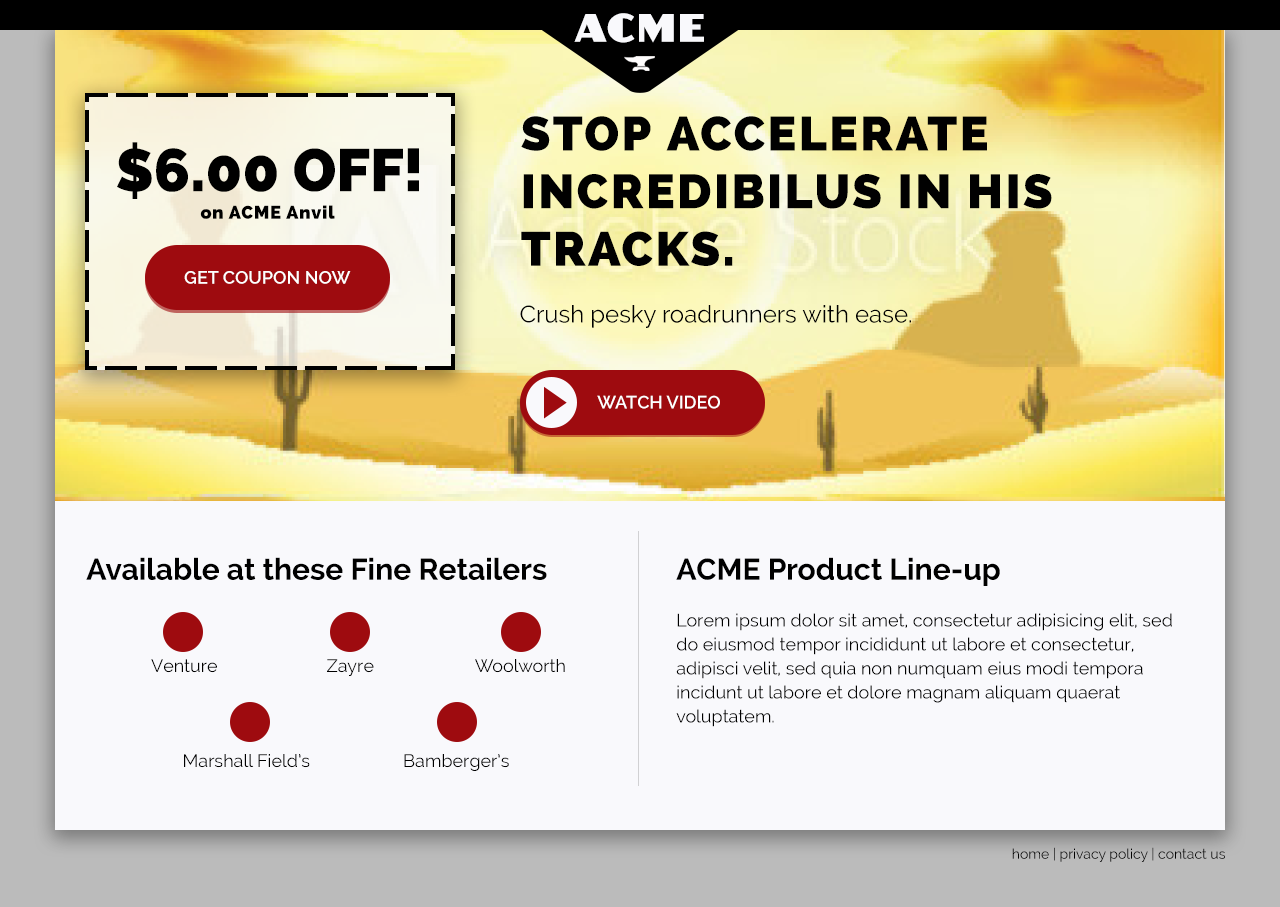
<style>
.page{position:relative;width:1280px;height:907px;background:#f9f9fc}
.page>*{position:absolute;margin:0}
.t1{font:37px "AnchorJack";letter-spacing:0.05em;color:#f9f9fc}
.t2{font:48px "Raleway-Heavy";letter-spacing:0.05em;color:#010101;text-transform:uppercase}
.t3{font:60px "Raleway-Heavy";color:#000000}
.t4{font:18px "Raleway-Heavy";letter-spacing:0.05em;color:#000000}
.t5{font:18px "Raleway-SemiBold";color:#ffffff;text-transform:uppercase}
.t6{font:24px "Raleway";color:#000000}
.t7{font:30px "Raleway-Bold";color:#000000}
.t8{font:18px/24px "Raleway";color:#000000}
.t9{font:18px "Raleway";color:#000000}
.t10{font:14px "Raleway";color:#010101}
</style>
<div class="page">
<p class="t1" style="left:574px;top:13px;width:130px;height:30px">ACME</p>
<p class="t2" style="left:521px;top:116px;width:531px;height:150px">Stop Accelerate Incredibilus in his Tracks.</p>
<p class="t3" style="left:117px;top:142px;width:302px;height:57px">$6.00 OFF!</p>
<p class="t4" style="left:200px;top:205px;width:135px;height:14px">on ACME Anvil</p>
<p class="t5" style="left:184px;top:271px;width:167px;height:13px">Get coupon now</p>
<p class="t6" style="left:520px;top:305px;width:391px;height:23px">Crush pesky roadrunners with ease.</p>
<p class="t5" style="left:597px;top:395px;width:123px;height:14px">Watch video</p>
<p class="t7" style="left:86px;top:557px;width:461px;height:23px">Available at these Fine Retailers</p>
<p class="t7" style="left:676px;top:557px;width:324px;height:29px">ACME Product Line-up</p>
<p class="t8" style="left:676px;top:613px;width:496px;height:114px">Lorem ipsum dolor sit amet, consectetur adipisicing elit, sed do eiusmod tempor incididunt ut labore et consectetur, adipisci velit, sed quia non numquam eius modi tempora incidunt ut labore et dolore magnam aliquam quaerat voluptatem.</p>
<p class="t9" style="left:151px;top:659px;width:66px;height:14px">Venture</p>
<p class="t9" style="left:327px;top:659px;width:47px;height:17px">Zayre</p>
<p class="t9" style="left:475px;top:659px;width:90px;height:14px">Woolworth</p>
<p class="t9" style="left:184px;top:754px;width:126px;height:14px">Marshall Field’s</p>
<p class="t9" style="left:404px;top:754px;width:105px;height:17px">Bamberger’s</p>
<p class="t10" style="left:1012px;top:847px;width:213px;height:15px">home | privacy policy | contact us</p>
</div>
